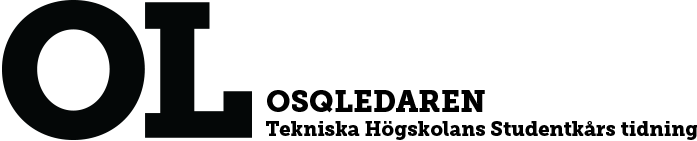
<style>
.page{position:relative;width:697px;height:141px;background:#ffffff}
.page>*{position:absolute;margin:0}
.t1{font:20px "MuseoSlab-900";color:#000000}
.t2{font:30px "MuseoSlab-900";color:#000000}
</style>
<div class="page">
<p class="t1" style="left:266px;top:90px;width:432px;height:50px"><span class="t2">OSQLEDAREN<br></span>Tekniska Högskolans Studentkårs tidning</p>
</div>
